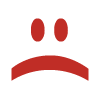
<style>
.page{position:relative;width:100px;height:100px;background:#ffffff}
.page>*{position:absolute;margin:0}
.t1{font:72px "StoneSansITC-Bold";color:#c02d26;scale:1.71 1}
.t2{font:84.3px "HelveticaNeue-Bold";color:#c02d26;scale:1.19 1}
</style>
<div class="page">
<p class="t1" style="left:31px;top:18px;width:37px;height:24px;rotate:90deg">:</p>
<p class="t2" style="left:11px;top:55px;width:78px;height:26px;rotate:-90deg">)</p>
</div>
